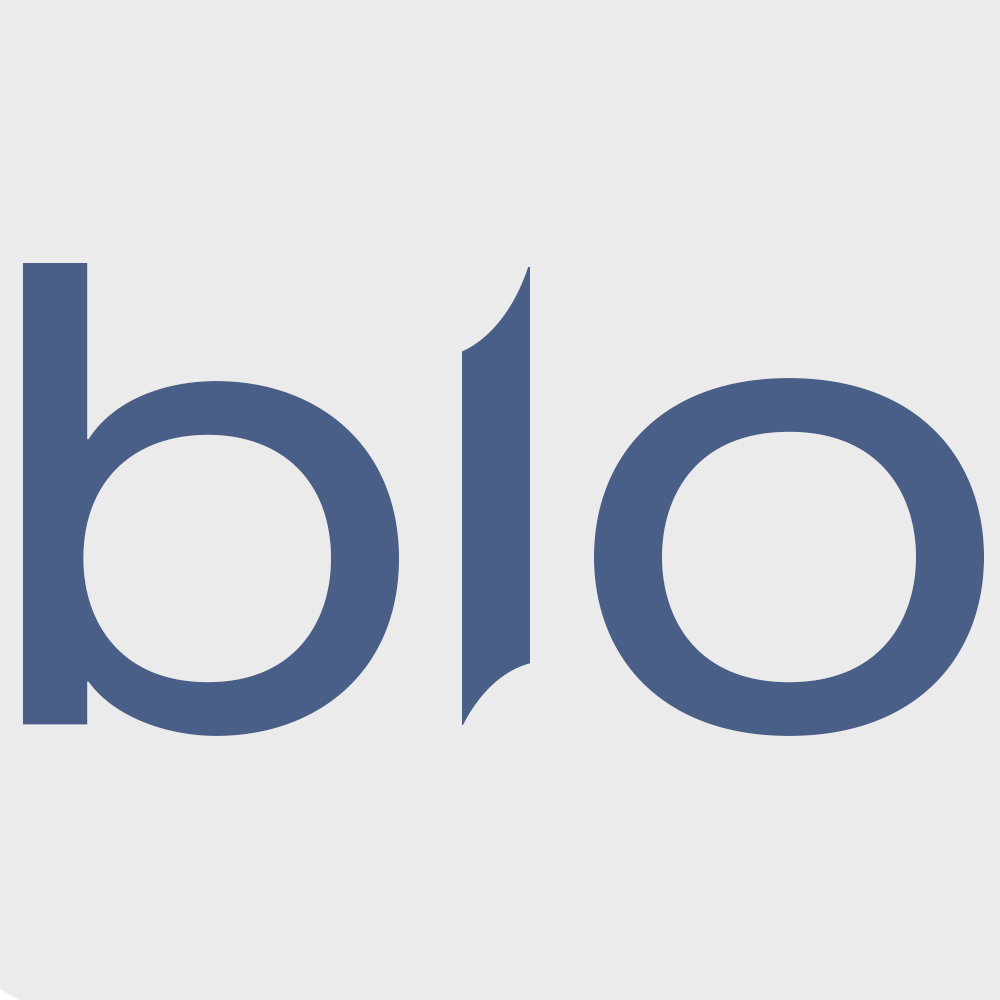
<style>
.page{position:relative;width:1000px;height:1000px;background:#ebebeb}
.page>*{position:absolute;margin:0}
.t1{font:641.3px "HelveticaNeue-Extended";letter-spacing:-0.025em;color:#495f88}
</style>
<div class="page">
<p class="t1" style="left:23px;top:263px;width:961px;height:473px">bIo</p>
</div>
